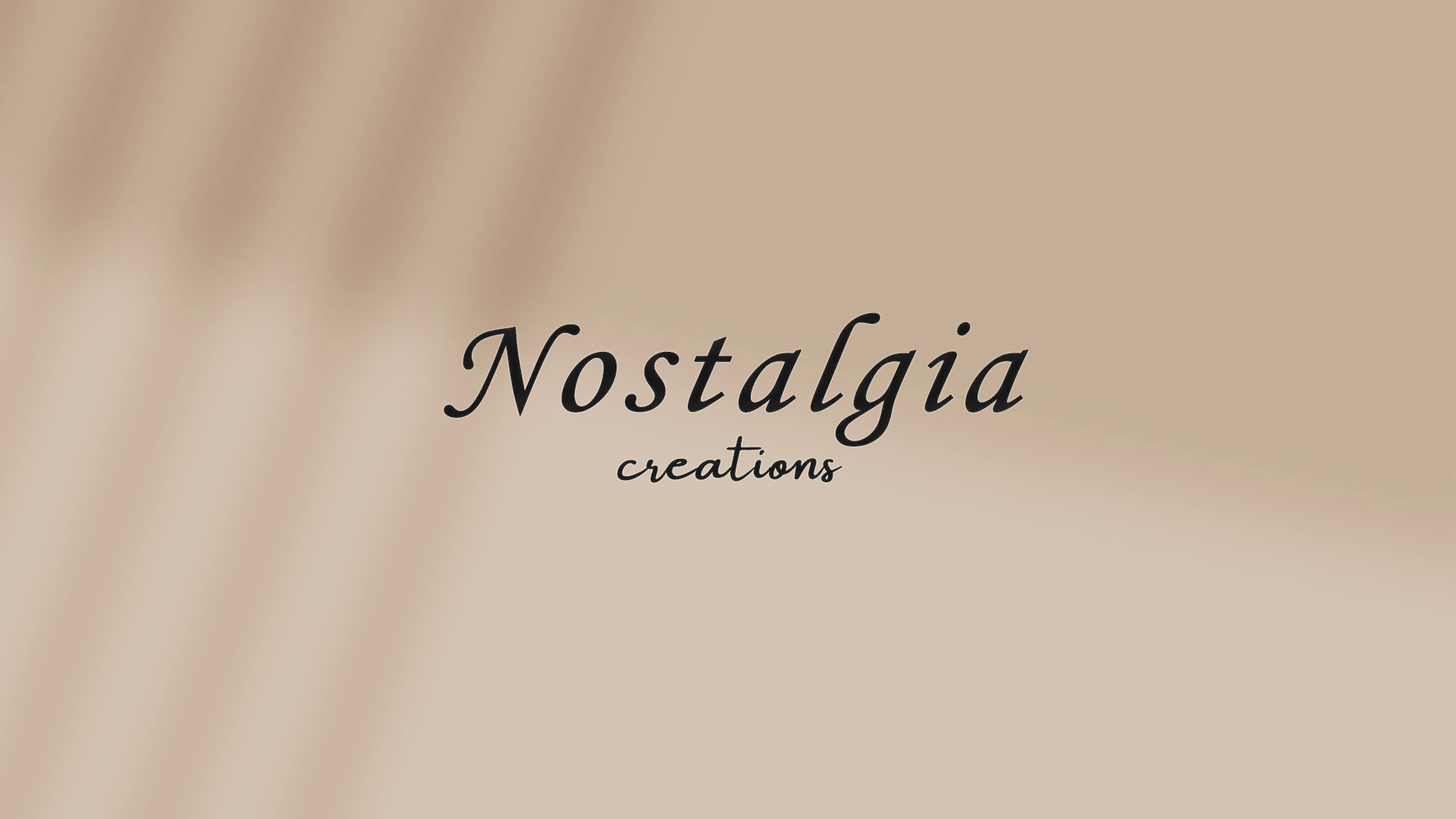
<style>
.page{position:relative;width:1456px;height:819px;background:#c4ae97}
.page>*{position:absolute;margin:0}
.t1{font:140.5px/11.1px "MonotypeCorsiva";letter-spacing:0.05em;color:#090909;font-weight:bold;font-style:italic}
.t2{font:140.5px/11.1px "MonotypeCorsiva";color:#3e3c3a;font-weight:bold;font-style:italic}
.t3{font:60.7px "Amsterdam";color:#090909;font-weight:bold;font-style:italic}
</style>
<div class="page">
<p class="t1" style="left:444px;top:312px;width:585px;height:171px;text-align:center"><span class="t2"><br><br><br></span>Nostalgia<br><span class="t3">creations</span></p>
</div>
